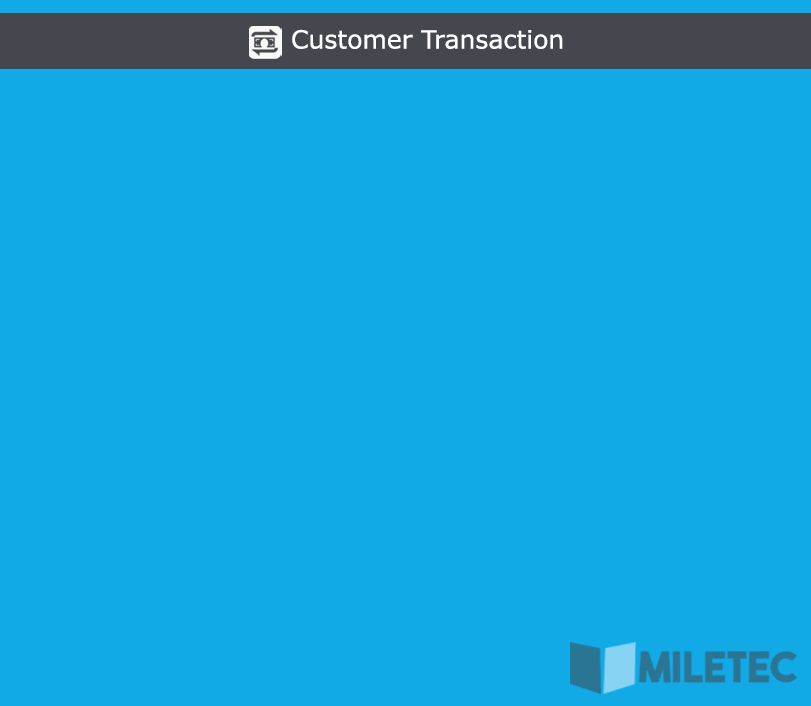
<style>
.page{position:relative;width:811px;height:706px;background:#12a9e7}
.page>*{position:absolute;margin:0}
.t1{font:25px "Verdana";color:#ffffff}
</style>
<div class="page">
<p class="t1" style="left:292px;top:29px;width:271px;height:20px">Customer Transaction</p>
</div>
